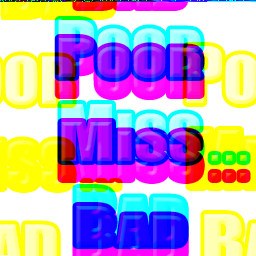
<style>
.page{position:relative;width:256px;height:256px;background:#ffffff}
.page>*{position:absolute;margin:0}
.t1{font:36px "Impact";scale:1.1 1}
.t2{font:72px "Impact";scale:1.1 1}
.t3{font:60px "Impact";scale:1.1 1}
.t4{font:72px "Impact"}
</style>
<div class="page">
<p class="t1" style="left:61px;top:102px;width:186px;height:58px"><span class="t2">M</span><span class="t3">I</span><span class="t4">ss </span>. . .</p>
<p class="t3" style="left:76px;top:186px;width:109px;height:57px"><span class="t2">B</span>AD</p>
</div>
